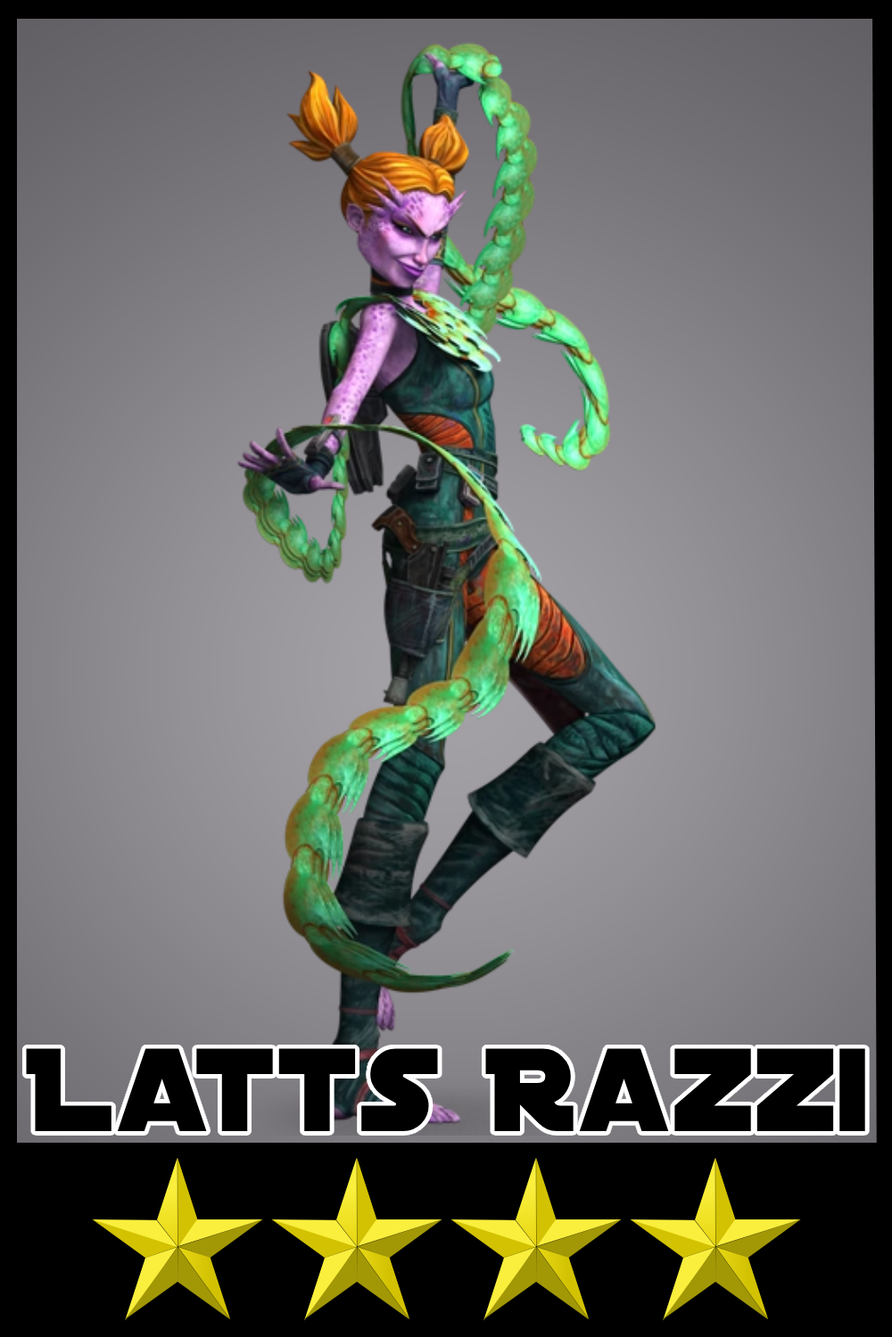
<style>
.page{position:relative;width:892px;height:1337px}
.page>*{position:absolute;margin:0}
.t1{font:126.8px "DistantGalaxy";color:#000000}
</style>
<div class="page">
<p class="t1" style="left:26px;top:1049px;width:839px;height:82px">Latts Razzi</p>
</div>
